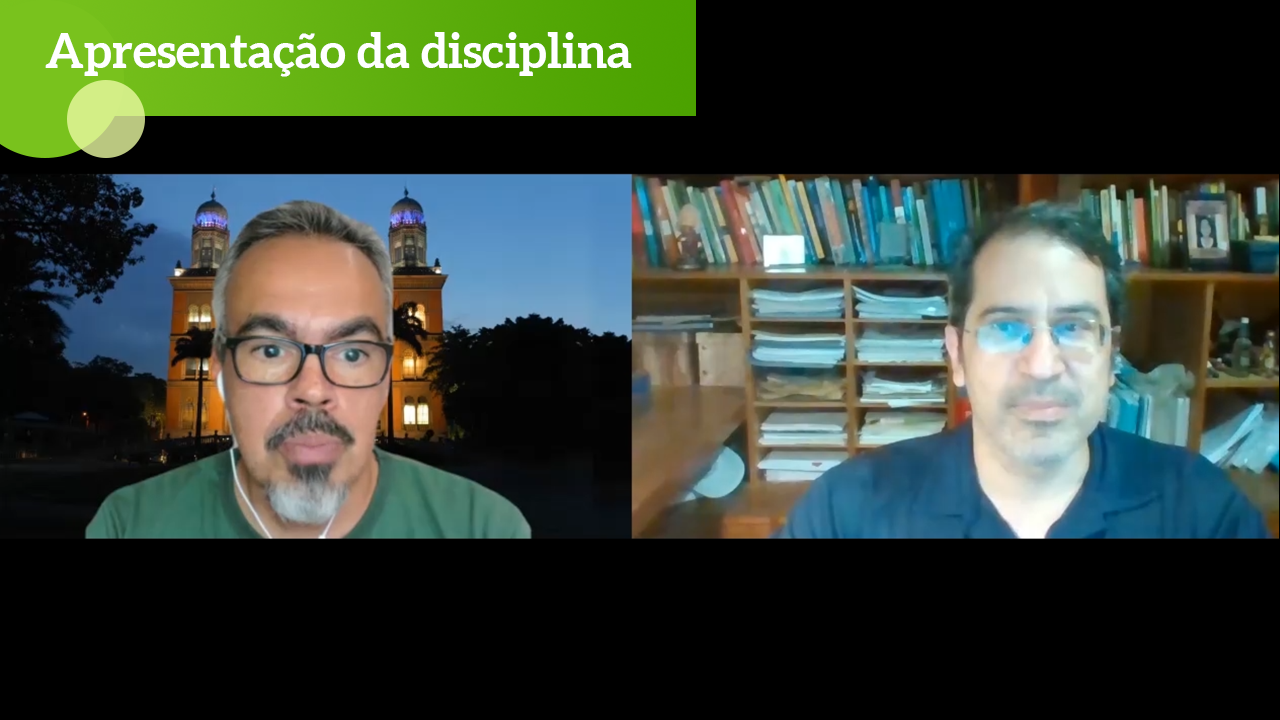
<style>
.page{position:relative;width:1280px;height:720px;background:#000000}
.page>*{position:absolute;margin:0}
.t1{font:48px "Aleo-Bold";color:#ffffff}
</style>
<div class="page">
<p class="t1" style="left:45px;top:32px;width:587px;height:45px">Apresentação da disciplina</p>
</div>
